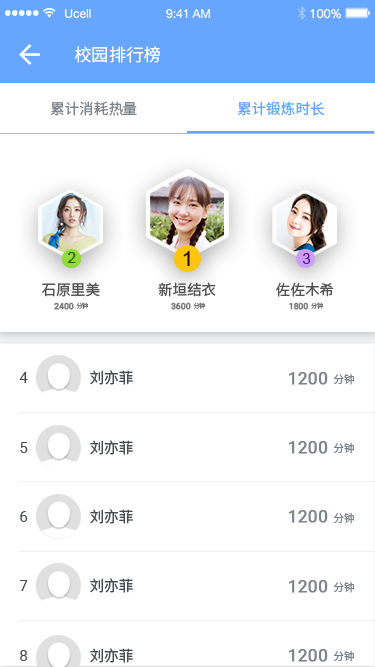
<style>
.page{position:relative;width:375px;height:667px;background:#ffffff}
.page>*{position:absolute;margin:0}
.t1{font:17.3px "NotoSansHans-Regular";color:#ffffff}
.t2{font:14.6px "NotoSansHans-Regular";color:#7e848c}
.t3{font:14.6px "NotoSansHans-Regular";color:#66a6ff}
.t4{font:14.6px "ArialMT";color:#2b5603}
.t5{font:20.5px "ArialMT";color:#2e0900}
.t6{font:14.6px "ArialMT";color:#521d85}
.t7{font:14.6px "NotoSansHans-Regular";color:#535353}
.t8{font:8.6px "Roboto-Regular";color:#757575;font-weight:bold}
.t9{font:6.2px "NotoSansHans-Regular";color:#757575}
.t10{font:14.6px "Roboto-Regular";color:#474a4f}
.t11{font:14.6px "NotoSansHans-Regular";color:#474a4f}
.t12{font:17.2px "Roboto-Regular";color:#7e848c;font-weight:bold}
.t13{font:10.3px "NotoSansHans-Regular";color:#7e848c}
</style>
<div class="page">
<p class="t1" style="left:74px;top:46px;width:86px;height:17px">校园排行榜</p>
<p class="t2" style="left:50px;top:101px;width:87px;height:15px">累计消耗热量</p>
<p class="t3" style="left:237px;top:101px;width:88px;height:15px">累计锻炼时长</p>
<p class="t4" style="left:67px;top:252px;width:9px;height:11px">2</p>
<p class="t5" style="left:183px;top:251px;width:7px;height:15px">1</p>
<p class="t6" style="left:302px;top:253px;width:9px;height:11px">3</p>
<p class="t7" style="left:42px;top:282px;width:58px;height:15px">石原里美</p>
<p class="t7" style="left:158px;top:282px;width:58px;height:15px">新垣结衣</p>
<p class="t7" style="left:276px;top:282px;width:58px;height:15px">佐佐木希</p>
<p class="t8" style="left:54px;top:302px;width:20px;height:8px">2400</p>
<p class="t9" style="left:76px;top:302px;width:12px;height:7px">分钟</p>
<p class="t8" style="left:171px;top:302px;width:20px;height:8px">3600</p>
<p class="t9" style="left:193px;top:302px;width:12px;height:7px">分钟</p>
<p class="t8" style="left:289px;top:302px;width:19px;height:8px">1800</p>
<p class="t9" style="left:311px;top:302px;width:12px;height:7px">分钟</p>
<p class="t10" style="left:19px;top:372px;width:9px;height:11px">4</p>
<p class="t11" style="left:90px;top:370px;width:43px;height:15px">刘亦菲</p>
<p class="t12" style="left:288px;top:372px;width:40px;height:13px">1200</p>
<p class="t13" style="left:334px;top:373px;width:20px;height:12px">分钟</p>
<p class="t10" style="left:20px;top:442px;width:8px;height:11px">5</p>
<p class="t11" style="left:90px;top:440px;width:43px;height:15px">刘亦菲</p>
<p class="t12" style="left:288px;top:441px;width:40px;height:13px">1200</p>
<p class="t13" style="left:334px;top:442px;width:20px;height:12px">分钟</p>
<p class="t11" style="left:90px;top:509px;width:43px;height:15px">刘亦菲</p>
<p class="t12" style="left:288px;top:510px;width:40px;height:13px">1200</p>
<p class="t10" style="left:20px;top:511px;width:8px;height:11px">6</p>
<p class="t13" style="left:334px;top:512px;width:20px;height:12px">分钟</p>
<p class="t10" style="left:19px;top:580px;width:9px;height:11px">7</p>
<p class="t11" style="left:90px;top:578px;width:43px;height:15px">刘亦菲</p>
<p class="t12" style="left:288px;top:580px;width:40px;height:13px">1200</p>
<p class="t13" style="left:334px;top:581px;width:20px;height:12px">分钟</p>
<p class="t10" style="left:20px;top:650px;width:7px;height:11px">8</p>
<p class="t11" style="left:90px;top:648px;width:43px;height:15px">刘亦菲</p>
<p class="t12" style="left:288px;top:649px;width:40px;height:13px">1200</p>
<p class="t13" style="left:334px;top:650px;width:20px;height:12px">分钟</p>
</div>
